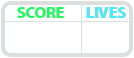
<style>
.page{position:relative;width:134px;height:58px;background:#ffffff}
.page>*{position:absolute;margin:0}
.t1{font:12px "MyriadPro-Bold";color:#14ff5c}
.t2{font:12px "MyriadPro-Bold"}
.t3{font:12px "MyriadPro-Bold";color:#3eefff}
</style>
<div class="page">
<p class="t1" style="left:17px;top:7px;width:47px;height:11px">SCORE</p>
<p class="t2" style="left:18px;top:7px;width:47px;height:11px">SCORE</p>
<p class="t3" style="left:86px;top:7px;width:39px;height:11px">LIVES</p>
<p class="t2" style="left:87px;top:7px;width:39px;height:11px">LIVES</p>
</div>
